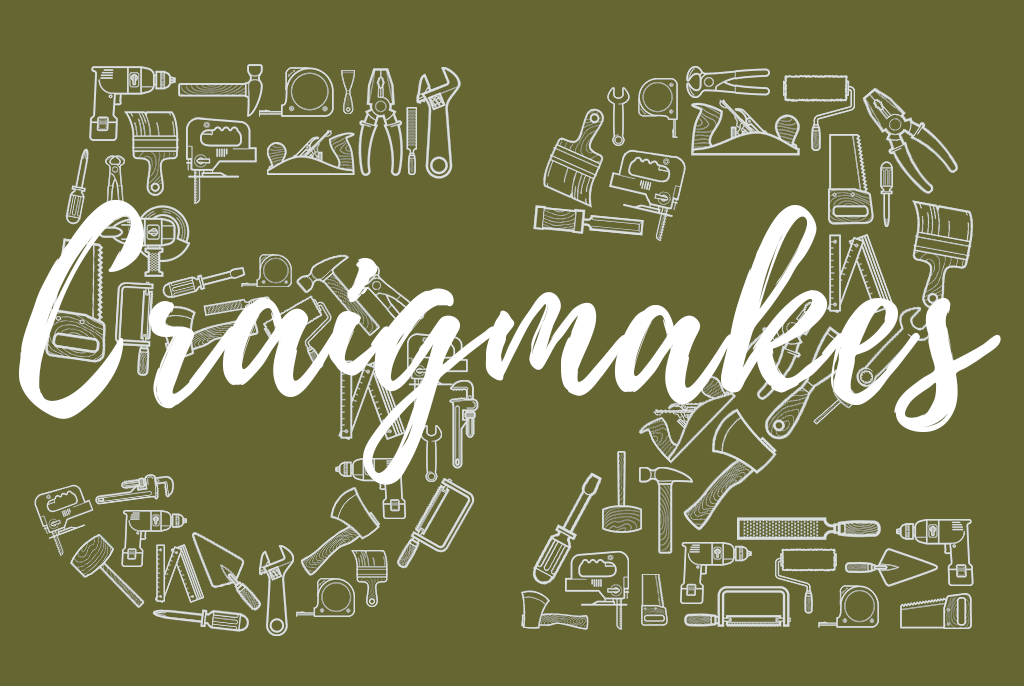
<style>
.page{position:relative;width:1024px;height:686px;background:#666633}
.page>*{position:absolute;margin:0}
.t1{font:230px "Playlist-Script";letter-spacing:0.025em;color:#ffffff}
</style>
<div class="page">
<p class="t1" style="left:19px;top:199px;width:477px;height:286px">Craig</p>
<p class="t1" style="left:485px;top:205px;width:516px;height:227px">makes</p>
</div>
